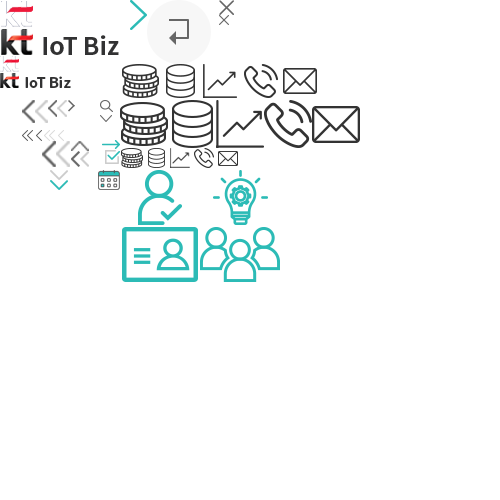
<style>
.page{position:relative;width:500px;height:500px;background:#ffffff}
.page>*{position:absolute;margin:0}
.t1{font:24px "NotoSansCJKkr-Bold";color:#323233}
.t2{font:14.3px "NotoSansCJKkr-Bold";color:#323233}
</style>
<div class="page">
<p class="t1" style="left:43px;top:35px;width:76px;height:20px">IoT Biz</p>
<p class="t2" style="left:25px;top:76px;width:46px;height:12px">IoT Biz</p>
</div>
